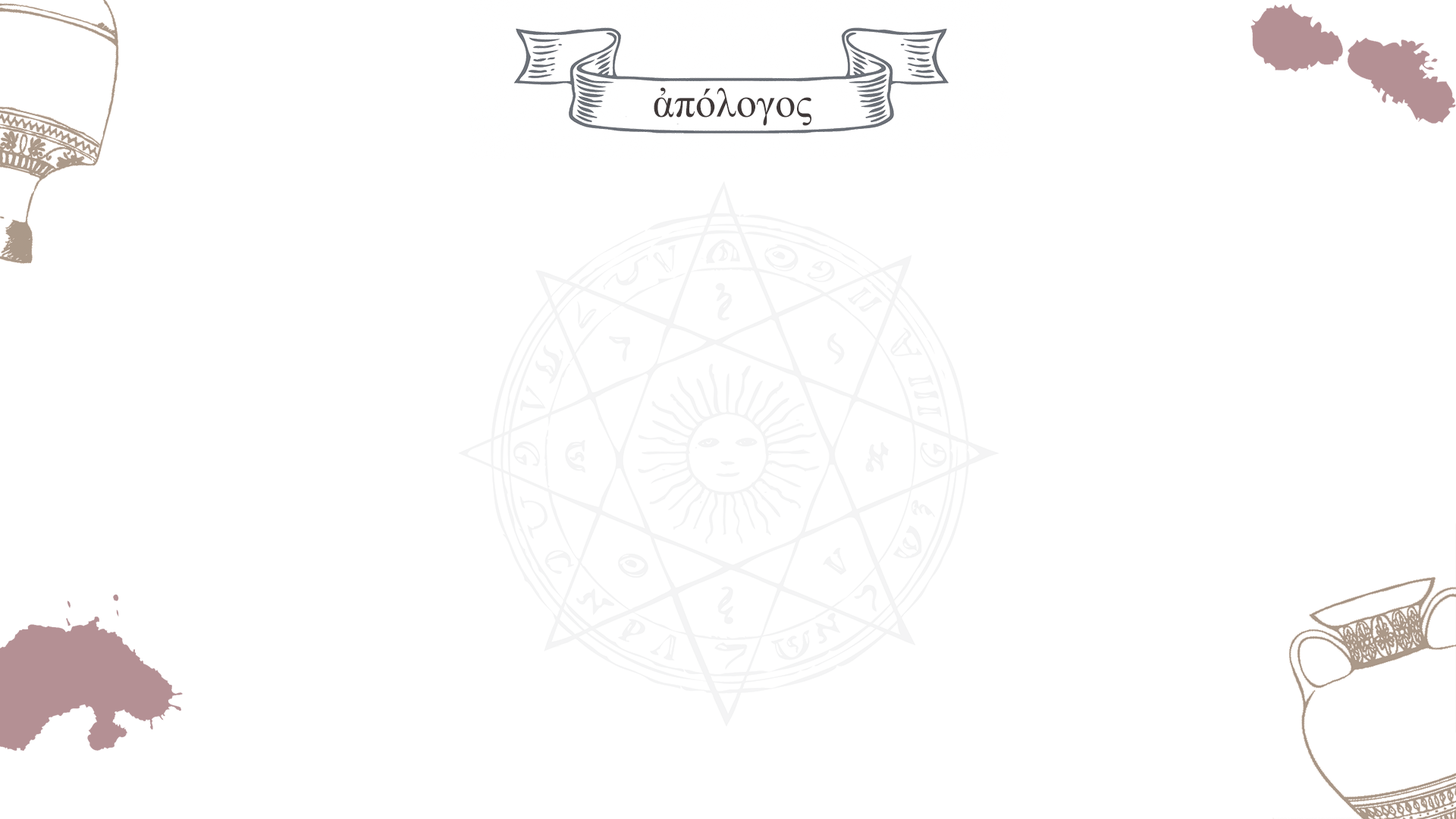
<style>
.page{position:relative;width:1456px;height:819px;background:#ffffff}
.page>*{position:absolute;margin:0}
.t1{font:41.4px "TimesNewRomanPSMT";color:#3f3838}
</style>
<div class="page">
<p class="t1" style="left:654px;top:87px;width:157px;height:39px">ἀπόλογος</p>
</div>
